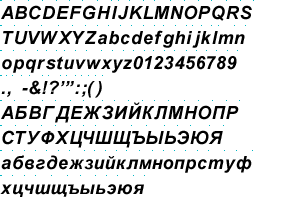
<style>
.page{position:relative;width:300px;height:200px;background:#ffffff}
.page>*{position:absolute;margin:0}
.t1{font:18px/25px "Arial-BoldItalicMT";letter-spacing:0.06em;color:#000000}
.t2{font:18px/25px "Arial-BoldItalicMT";letter-spacing:0.02em;color:#000000}
.t3{font:18px/25px "Arial-BoldItalicMT";letter-spacing:0.025em;color:#000000}
.t4{font:18px/25px "Arial-BoldItalicMT";letter-spacing:0.065em;color:#000000}
.t5{font:18px/25px "Arial-BoldItalicMT";letter-spacing:0.055em;color:#000000}
.t6{font:18px/25px "Arial-BoldItalicMT";letter-spacing:0.075em;color:#000000}
.t7{font:18px/25px "Arial-BoldItalicMT";letter-spacing:0.078em;color:#000000}
.t8{font:18px/25px "Arial-BoldItalicMT";letter-spacing:0.095em;color:#000000}
.t9{font:18px/25px "Arial-BoldItalicMT";letter-spacing:0.05em;color:#000000}
.t10{font:18px/25px "Arial-BoldItalicMT";letter-spacing:0.01em;color:#000000}
.t11{font:18px/25px "Arial-BoldItalicMT";letter-spacing:0.03em;color:#000000}
.t12{font:18px/25px "Arial-BoldItalicMT";letter-spacing:0.015em;color:#000000}
.t13{font:18px/25px "Arial-BoldItalicMT";letter-spacing:0.08em;color:#000000}
.t14{font:18px/25px "Arial-BoldItalicMT";letter-spacing:0.15em;color:#000000;scale:0.95 1}
.t15{font:18px/25px "Arial-BoldItalicMT";letter-spacing:0.1em;color:#000000}
.t16{font:18px/25px "Arial-BoldItalicMT";letter-spacing:0.04em;color:#000000}
.t17{font:18px/25px "Arial-BoldItalicMT";letter-spacing:0.155em;color:#000000}
.t18{font:18px/25px "Arial-BoldItalicMT";letter-spacing:0.2em;color:#000000}
.t19{font:18px/25px "Arial-BoldItalicMT";letter-spacing:0.035em;color:#000000}
.t20{font:18px/25px "Arial-BoldItalicMT";letter-spacing:0.115em;color:#000000}
.t21{font:18px/25px "Arial-BoldItalicMT";letter-spacing:0.049em;color:#000000}
.t22{font:18px/25px "Arial-BoldItalicMT";letter-spacing:0.097em;color:#000000}
.t23{font:18px/25px "Arial-BoldItalicMT";letter-spacing:0.014em;color:#000000}
.t24{font:18px/25px "Arial-BoldItalicMT";color:#000000}
.t25{font:18px/25px "Arial-BoldItalicMT";letter-spacing:-0.015em;color:#000000}
.t26{font:18px/25px "Arial-BoldItalicMT";letter-spacing:0.07em;color:#000000}
.t27{font:18px/25px "Arial-BoldItalicMT";letter-spacing:0.17em;color:#000000}
.t28{font:18px/25px "Arial-BoldItalicMT";letter-spacing:0.045em;color:#000000}
.t29{font:18px/25px "Arial-BoldItalicMT";letter-spacing:-0.01em;color:#000000}
.t30{font:18px/25px "Arial-BoldItalicMT";letter-spacing:0.09em;color:#000000}
.t31{font:18px/25px "Arial-BoldItalicMT";letter-spacing:-0.06em;color:#000000}
.t32{font:18px/25px "Arial-BoldItalicMT";letter-spacing:-0.025em;color:#000000}
.t33{font:18px/25px "Arial-BoldItalicMT";letter-spacing:-0.02em;color:#000000}
.t34{font:18px/25px "Arial-BoldItalicMT";letter-spacing:0.085em;color:#000000}
.t35{font:18px/25px "Arial-BoldItalicMT";letter-spacing:0.12em;color:#000000}
</style>
<div class="page">
<p class="t1" style="left:0px;top:5px;width:252px;height:192px"><span class="t2">A</span><span class="t3">B</span><span class="t4">C</span>D<span class="t5">E</span><span class="t6">FG</span><span class="t7">H</span><span class="t8">I</span><span class="t9">JK</span><span class="t10">L</span><span class="t9">M</span><span class="t11">N</span><span class="t12">O</span>PQRS<br><span class="t13">T</span><span class="t10">U</span><span class="t5">V</span><span class="t14">W</span><span class="t10">X</span><span class="t15">YZ</span><span class="t9">a</span><span class="t16">b</span><span class="t9">c</span>d<span class="t4">e</span><span class="t17">f</span><span class="t11">g</span><span class="t16">h</span><span class="t18">i</span><span class="t19">j</span><span class="t6">k</span><span class="t9">l</span><span class="t10">m</span>n<br><span class="t4">o</span><span class="t11">p</span><span class="t9">q</span><span class="t20">r</span><span class="t2">s</span><span class="t4">t</span><span class="t11">u</span><span class="t21">v</span><span class="t22">w</span><span class="t23">x</span><span class="t4">y</span><span class="t9">z</span><span class="t10">0</span><span class="t24">1</span><span class="t11">2</span><span class="t4">3</span><span class="t3">45</span><span class="t25">6</span><span class="t16">7</span><span class="t2">8</span>9<br>., <span class="t10">-</span><span class="t3">&amp;</span><span class="t10">!?’</span><span class="t4">”</span><span class="t16">:</span><span class="t24">;</span><span class="t18">(</span>)<br><span class="t10">А</span><span class="t26">Б</span><span class="t9">В</span><span class="t27">Г</span><span class="t9">Д</span><span class="t28">Е</span><span class="t15">Ж</span><span class="t9">ЗИЙ</span><span class="t15">К</span><span class="t9">Л</span><span class="t5">М</span><span class="t11">Н</span><span class="t3">О</span><span class="t28">П</span>Р<br><span class="t29">С</span><span class="t6">Т</span><span class="t30">У</span><span class="t6">Ф</span><span class="t15">Х</span><span class="t31">Ц</span><span class="t11">Ч</span><span class="t3">Ш</span><span class="t32">Щ</span><span class="t24">Ъ</span><span class="t2">Ы</span><span class="t33">Ь</span><span class="t28">Э</span><span class="t3">Ю</span>Я<br><span class="t5">а</span><span class="t16">б</span><span class="t11">в</span><span class="t28">гд</span><span class="t15">е</span><span class="t34">ж</span><span class="t10">з</span><span class="t24">ий</span><span class="t35">к</span><span class="t11">л</span><span class="t32">м</span><span class="t10">н</span><span class="t24">о</span><span class="t16">п</span><span class="t11">р</span><span class="t16">ст</span><span class="t6">у</span>ф<br><span class="t28">х</span><span class="t29">ц</span><span class="t3">ч</span><span class="t24">ш</span><span class="t33">щ</span><span class="t29">ъ</span><span class="t12">ы</span><span class="t19">ь</span><span class="t11">э</span><span class="t9">ю</span>я</p>
</div>
